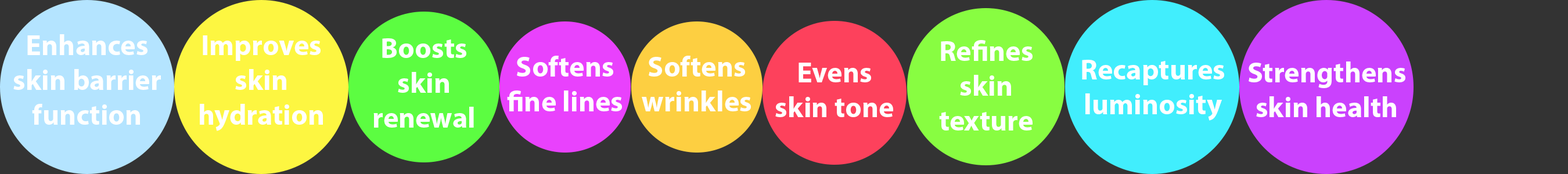
<style>
.page{position:relative;width:1568px;height:174px;background:#333333}
.page>*{position:absolute;margin:0}
.t1{font:29px "MyriadPro-Bold";color:#ffffff}
</style>
<div class="page">
<p class="t1" style="left:13px;top:34px;width:148px;height:91px;text-align:center">Enhances skin barrier function</p>
<p class="t1" style="left:200px;top:35px;width:123px;height:96px;text-align:center">Improves skin <br>hydration</p>
<p class="t1" style="left:373px;top:38px;width:101px;height:90px;text-align:center">Boosts skin <br>renewal</p>
<p class="t1" style="left:939px;top:40px;width:94px;height:91px;text-align:center">Refines skin <br>texture</p>
<p class="t1" style="left:507px;top:56px;width:115px;height:56px;text-align:center">Softens fine lines</p>
<p class="t1" style="left:642px;top:56px;width:109px;height:56px;text-align:center">Softens wrinkles</p>
<p class="t1" style="left:775px;top:63px;width:118px;height:54px;text-align:center">Evens <br>skin tone</p>
<p class="t1" style="left:1082px;top:60px;width:142px;height:61px;text-align:center">Recaptures <br>luminosity</p>
<p class="t1" style="left:1249px;top:62px;width:156px;height:55px;text-align:center">Strengthens <br>skin health</p>
</div>
